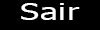
<style>
.page{position:relative;width:100px;height:30px;background:#000000}
.page>*{position:absolute;margin:0}
.t1{font:23.4px "Tahoma";letter-spacing:0.029em;color:#ffffff;scale:1.46 1}
</style>
<div class="page">
<p class="t1" style="left:21px;top:3px;width:59px;height:17px">Sair</p>
</div>
